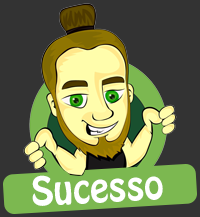
<style>
.page{position:relative;width:200px;height:217px;background:#333333}
.page>*{position:absolute;margin:0}
.t1{font:35px "HoboStd";color:#ffffff}
</style>
<div class="page">
<p class="t1" style="left:32px;top:175px;width:131px;height:31px;rotate:-3deg">Sucesso</p>
</div>
